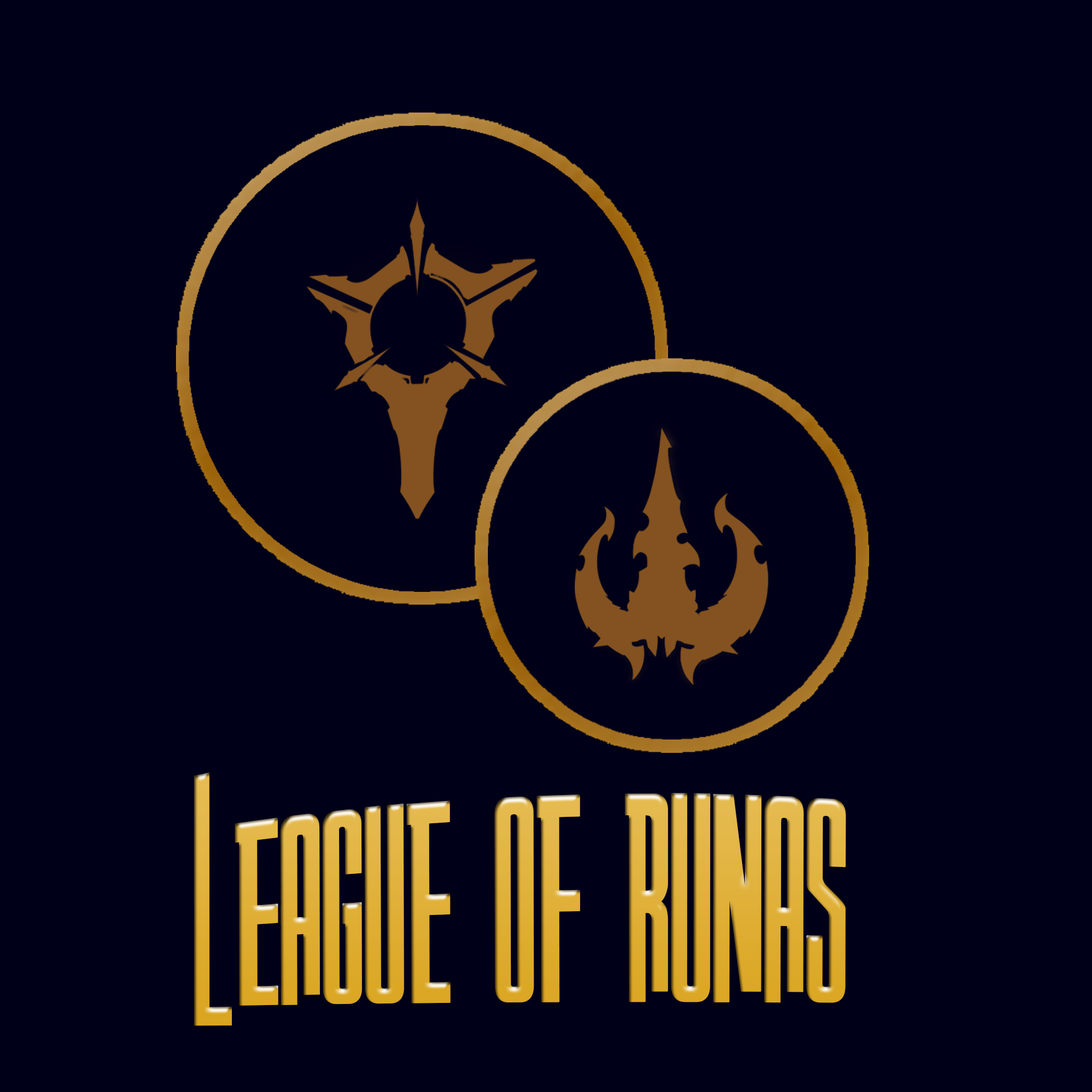
<style>
.page{position:relative;width:1092px;height:1092px;background:#000018}
.page>*{position:absolute;margin:0}
.t1{font:213.3px "AndersonCaptainScarlet";color:#deae37}
</style>
<div class="page">
<p class="t1" style="left:194px;top:773px;width:652px;height:253px">League of runas</p>
</div>
